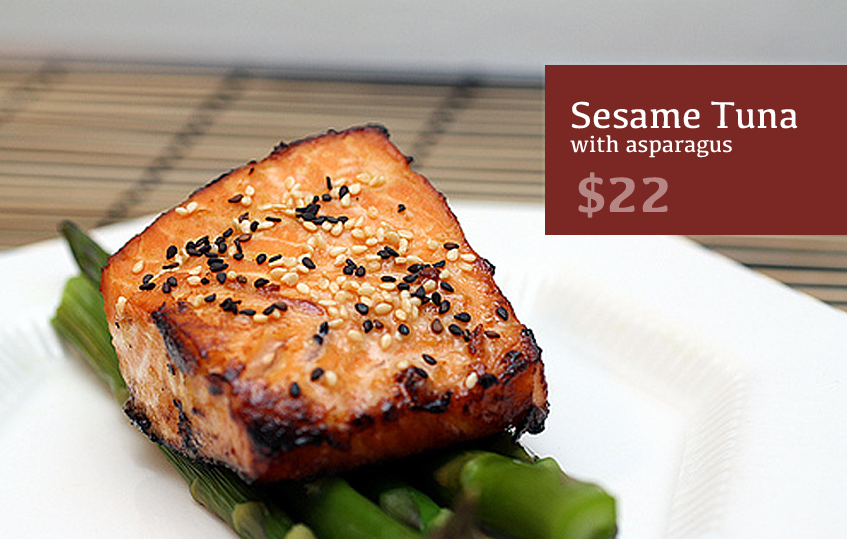
<style>
.page{position:relative;width:847px;height:539px}
.page>*{position:absolute;margin:0}
.t1{font:38.8px "Kefa-Regular";color:#ffffff}
.t2{font:23.9px "Kefa-Regular";color:#ffffff}
.t3{font:51.2px "Kefa-Bold";color:#b58684}
</style>
<div class="page">
<p class="t1" style="left:571px;top:101px;width:227px;height:28px">Sesame Tuna</p>
<p class="t2" style="left:570px;top:135px;width:162px;height:23px">with asparagus</p>
<p class="t3" style="left:578px;top:172px;width:90px;height:46px">$22</p>
</div>
